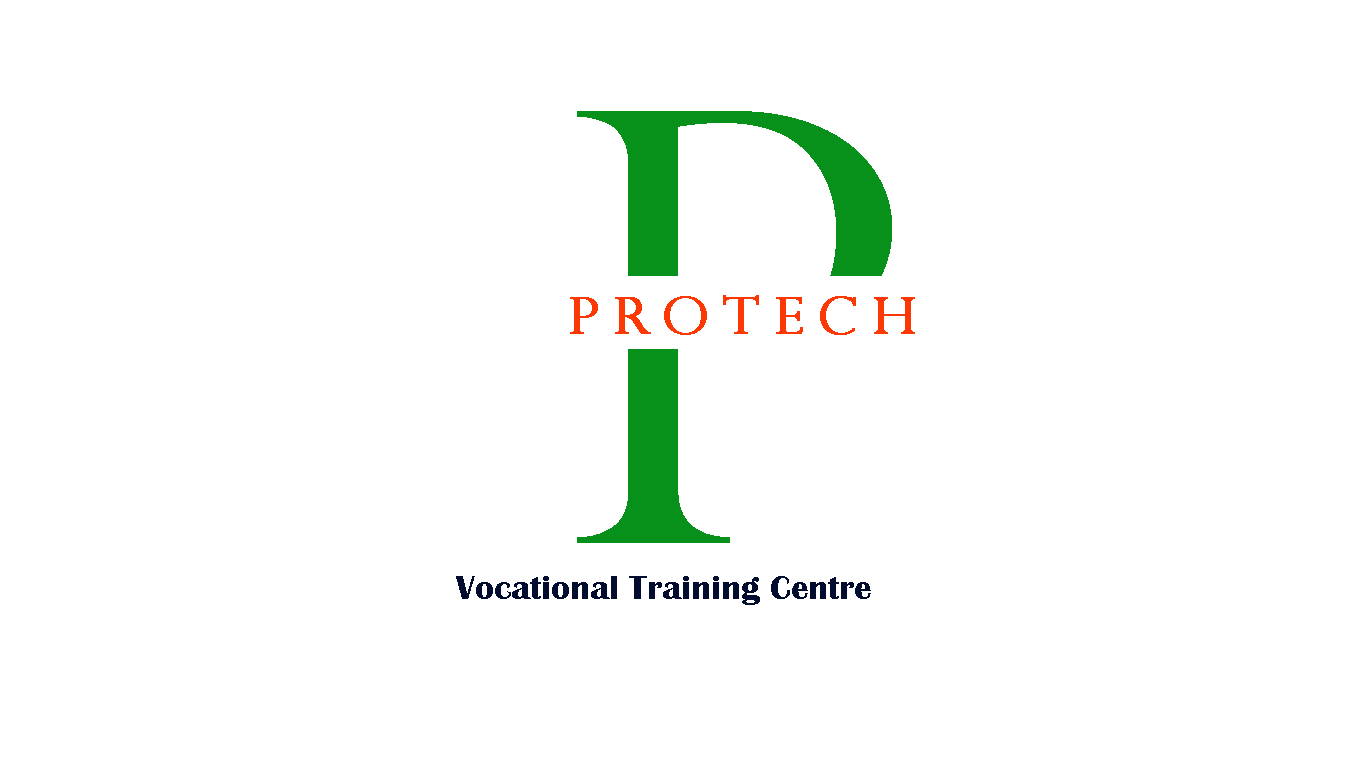
<style>
.page{position:relative;width:1366px;height:768px;background:#ffffff}
.page>*{position:absolute;margin:0}
.t1{font:600px "PerpetuaTitlingMT-Light";color:#07901a;scale:1.1 1}
.t2{font:50px "PerpetuaTitlingMT-Light";letter-spacing:0.25em;color:#fc3804;font-weight:bold;scale:1.1 1}
.t3{font:35px "BritannicBold";color:#010c2f}
</style>
<div class="page">
<p class="t1" style="left:577px;top:111px;width:315px;height:432px">P</p>
<p class="t2" style="left:570px;top:295px;width:345px;height:40px">ProTech</p>
<p class="t3" style="left:456px;top:576px;width:415px;height:29px">Vocational Training Centre</p>
</div>
